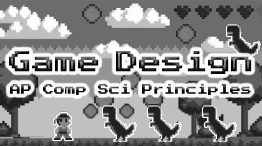
<style>
.page{position:relative;width:262px;height:146px}
.page>*{position:absolute;margin:0}
.t1{font:23px "PressStart2P-Regular"}
.t2{font:11px "PressStart2P-Regular"}
</style>
<div class="page">
<p class="t1" style="left:9px;top:51px;width:243px;height:23px">Game Design</p>
<p class="t2" style="left:10px;top:84px;width:241px;height:11px">AP Comp Sci Principles</p>
</div>
